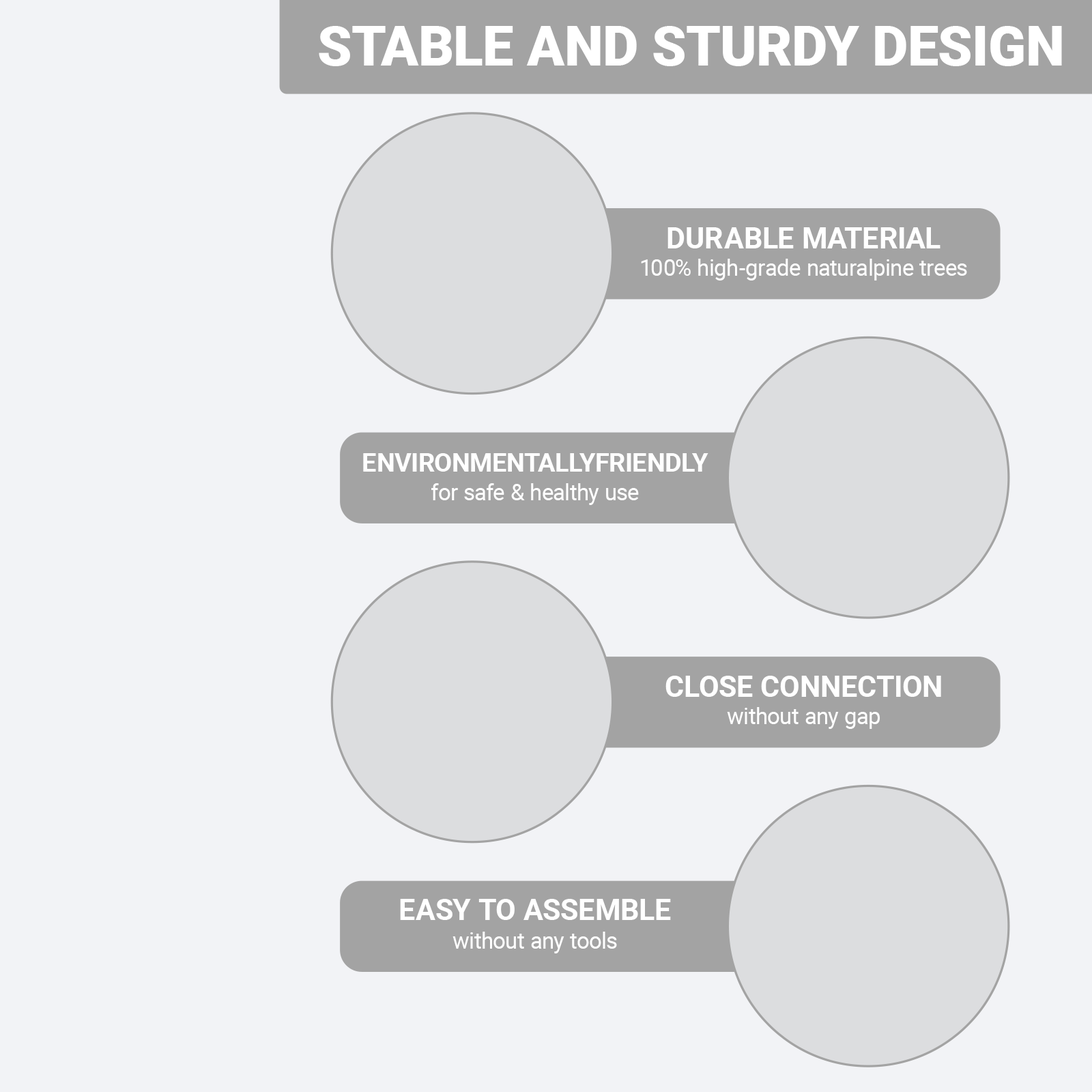
<style>
.page{position:relative;width:1092px;height:1092px;background:#f2f3f6}
.page>*{position:absolute;margin:0}
.t1{font:55px "Roboto-Black";color:#ffffff}
.t2{font:29.6px "Roboto-Bold";color:#ffffff}
.t3{font:22.2px "Roboto-Regular";color:#ffffff}
.t4{font:25.8px "Roboto-Bold";color:#ffffff}
</style>
<div class="page">
<p class="t1" style="left:319px;top:26px;width:743px;height:40px">STABLE AND STURDY DESIGN</p>
<p class="t2" style="left:667px;top:227px;width:273px;height:21px">DURABLE MATERIAL</p>
<p class="t3" style="left:641px;top:259px;width:326px;height:22px">100% high-grade naturalpine trees</p>
<p class="t4" style="left:363px;top:453px;width:345px;height:19px">ENVIRONMENTALLYFRIENDLY</p>
<p class="t3" style="left:431px;top:483px;width:208px;height:22px">for safe &amp; healthy use</p>
<p class="t2" style="left:665px;top:676px;width:276px;height:21px">CLOSE CONNECTION</p>
<p class="t3" style="left:727px;top:707px;width:153px;height:22px">without any gap</p>
<p class="t2" style="left:400px;top:899px;width:271px;height:21px">EASY TO ASSEMBLE</p>
<p class="t3" style="left:452px;top:932px;width:165px;height:21px">without any tools</p>
</div>
